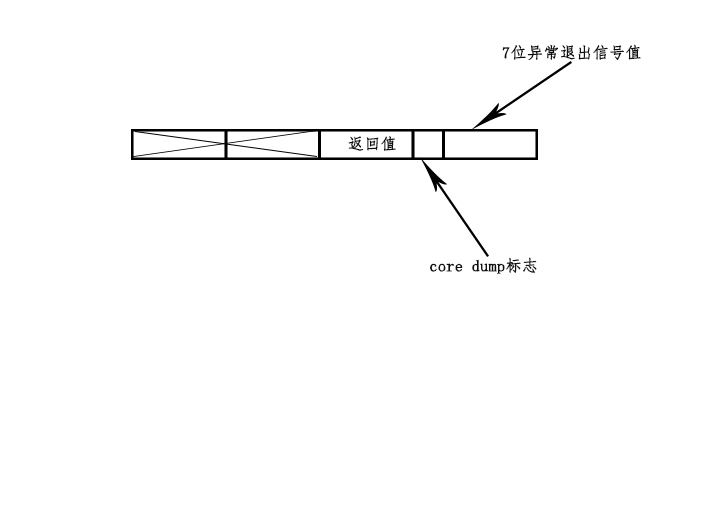
<style>
.page{position:relative;width:709px;height:510px;background:#ffffff}
.page>*{position:absolute;margin:0}
.t1{font:16px "FangSong";color:#111010;font-weight:bold}
</style>
<div class="page">
<p class="t1" style="left:502px;top:44px;width:139px;height:16px">7位异常退出信号值</p>
<p class="t1" style="left:348px;top:136px;width:48px;height:16px">返回值</p>
<p class="t1" style="left:430px;top:257px;width:107px;height:17px">core dump标志</p>
</div>
